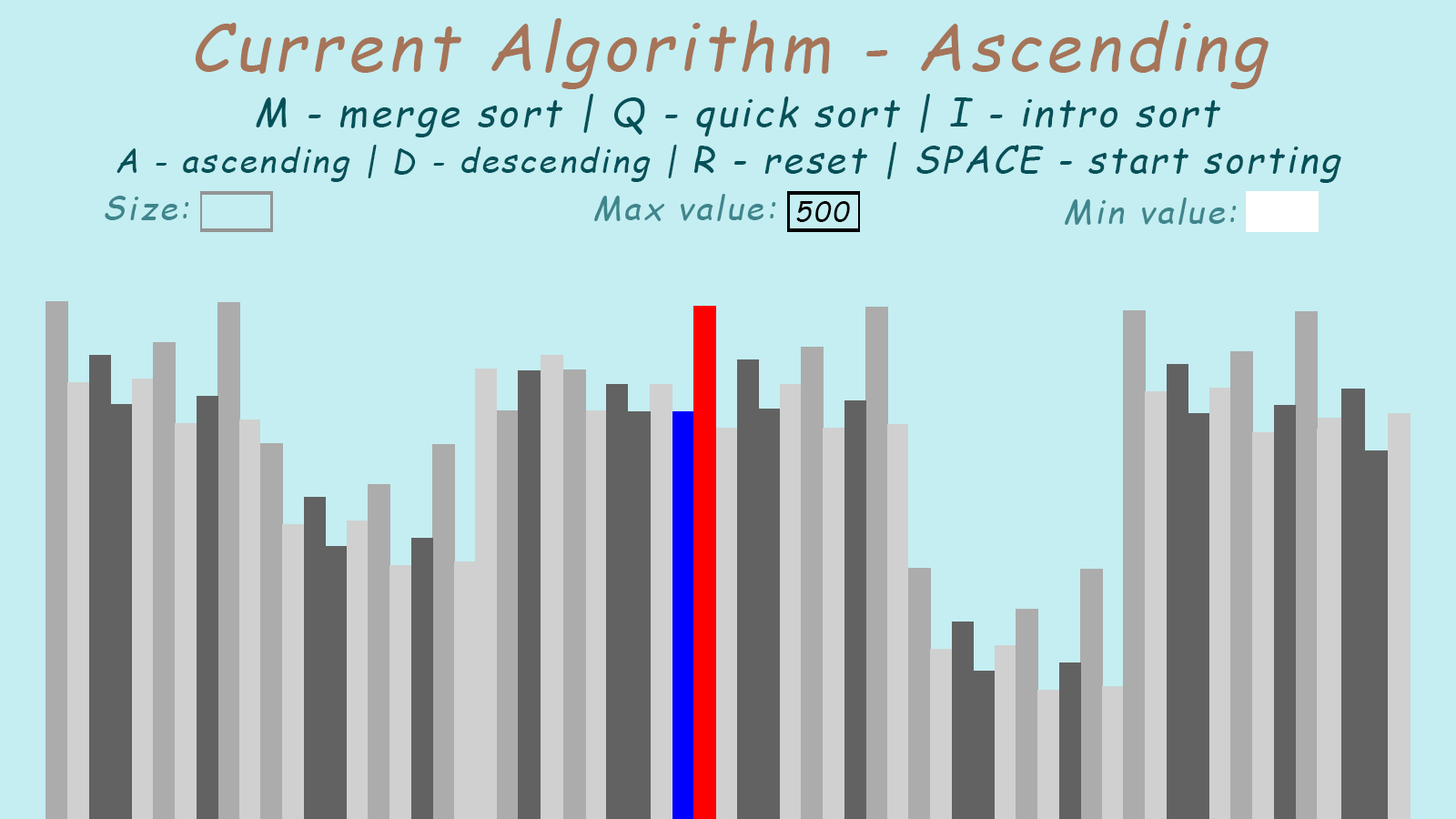
<style>
.page{position:relative;width:1456px;height:819px;background:#c4eef2}
.page>*{position:absolute;margin:0}
.t1{font:65.5px "ComicSansMS";letter-spacing:0.075em;color:#a67458;font-style:italic}
.t2{font:38.2px "ComicSansMS";letter-spacing:0.075em;color:#025159;font-style:italic}
.t3{font:36.4px "ComicSansMS";letter-spacing:0.075em;color:#025159;font-style:italic}
.t4{font:32.8px "ComicSansMS";letter-spacing:0.075em;color:#025159;font-style:italic}
.t5{font:32.8px "ComicSansMS";letter-spacing:0.075em;color:#3f858c;font-style:italic}
.t6{font:27.3px "ComicSansMS";letter-spacing:0.075em;color:#000000;font-style:italic}
</style>
<div class="page">
<p class="t1" style="left:195px;top:18px;width:1074px;height:71px">Current Algorithm - Ascending</p>
<p class="t2" style="left:256px;top:94px;width:964px;height:43px">M - merge sort | Q - quick sort | I - intro sort</p>
<p class="t3" style="left:116px;top:142px;width:1225px;height:41px"><span class="t4">A - ascending | D - descending | </span>R - reset | SPACE - start sorting</p>
<p class="t5" style="left:105px;top:196px;width:84px;height:24px">Size:</p>
<p class="t5" style="left:594px;top:194px;width:182px;height:27px">Max value:</p>
<p class="t5" style="left:1065px;top:197px;width:172px;height:28px">Min value:</p>
<p class="t6" style="left:796px;top:201px;width:54px;height:21px">500</p>
</div>
